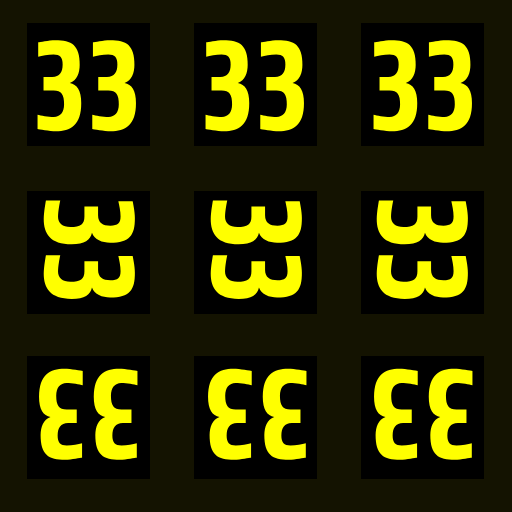
<style>
.page{position:relative;width:512px;height:512px;background:#141301}
.page>*{position:absolute;margin:0}
.t1{font:130px "Share-BoldOSF";color:#ffff00}
</style>
<div class="page">
<p class="t1" style="left:37px;top:40px;width:99px;height:92px">33</p>
<p class="t1" style="left:205px;top:40px;width:99px;height:92px">33</p>
<p class="t1" style="left:373px;top:40px;width:99px;height:92px">33</p>
<p class="t1" style="left:43px;top:200px;width:92px;height:99px;rotate:90deg">33</p>
<p class="t1" style="left:210px;top:200px;width:92px;height:99px;rotate:90deg">33</p>
<p class="t1" style="left:376px;top:200px;width:92px;height:99px;rotate:90deg">33</p>
<p class="t1" style="left:39px;top:368px;width:99px;height:92px;rotate:-180deg">33</p>
<p class="t1" style="left:208px;top:368px;width:99px;height:92px;rotate:-180deg">33</p>
<p class="t1" style="left:374px;top:368px;width:99px;height:92px;rotate:-180deg">33</p>
</div>
